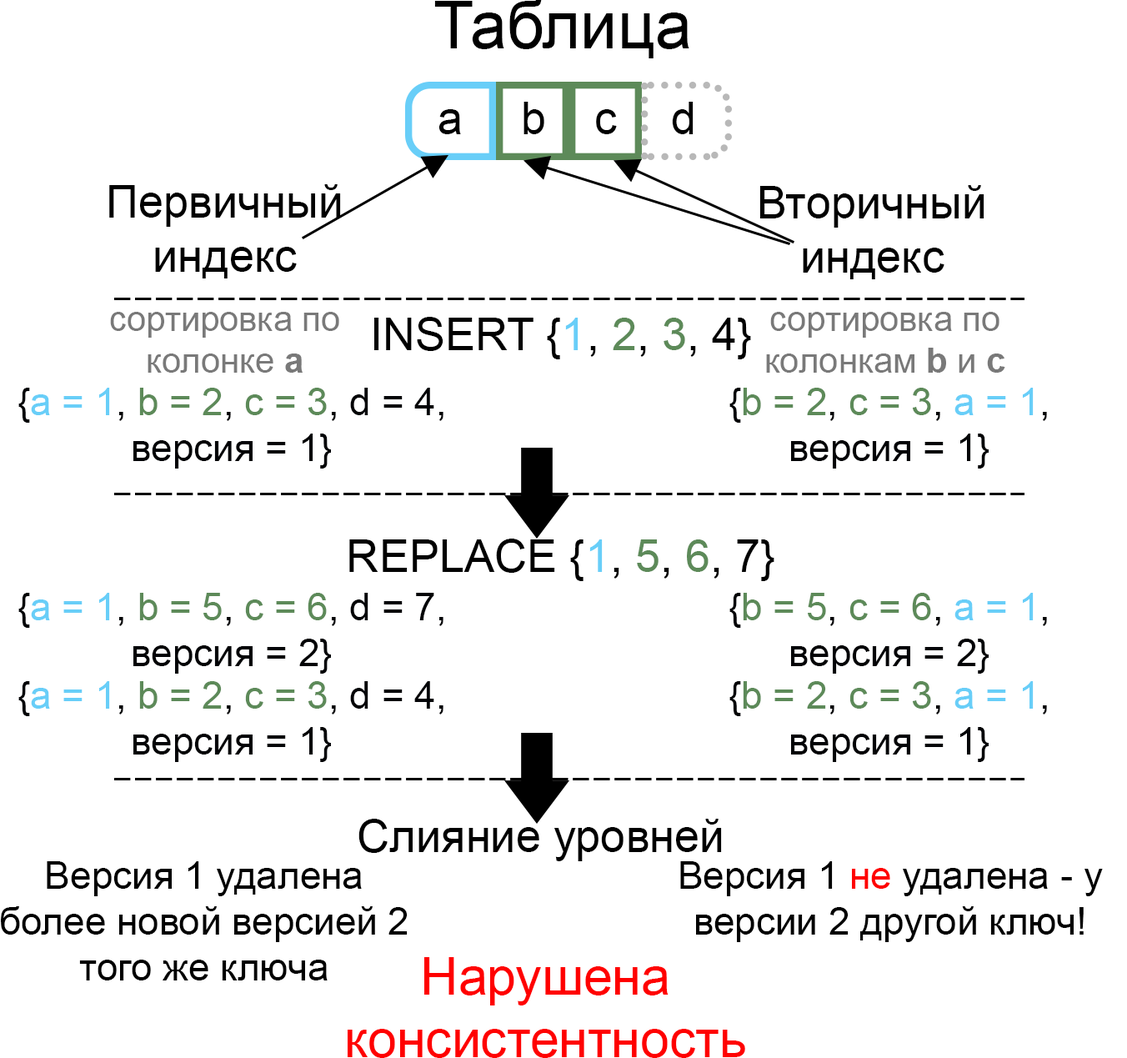
<style>
.page{position:relative;width:1127px;height:1058px;background:#ffffff}
.page>*{position:absolute;margin:0}
.t1{font:66px "ArialMT";color:#000000}
.t2{font:45.2px "ArialMT";color:#000000}
.t3{font:34.7px "ArialMT";color:#797979}
.t4{font:34.7px "Arial-BoldMT";color:#797979}
.t5{font:45.2px "ArialMT";color:#68cef8}
.t6{font:45.2px "ArialMT";color:#5d8a59}
.t7{font:38.2px "ArialMT";color:#020306}
.t8{font:38.2px "ArialMT";color:#68cef8}
.t9{font:38.2px "ArialMT";color:#5d8a59}
.t10{font:38.2px "ArialMT";color:#000000}
.t11{font:38.2px "ArialMT";color:#ff0000}
.t12{font:52.1px "ArialMT";color:#ff0000}
</style>
<div class="page">
<p class="t1" style="left:434px;top:0px;width:255px;height:58px">Таблица</p>
<p class="t2" style="left:524px;top:102px;width:20px;height:32px">b</p>
<p class="t2" style="left:672px;top:102px;width:22px;height:32px">d</p>
<p class="t2" style="left:439px;top:109px;width:22px;height:25px">a</p>
<p class="t2" style="left:596px;top:109px;width:21px;height:25px">c</p>
<p class="t2" style="left:109px;top:184px;width:232px;height:94px;text-align:center">Первичный<br>индекс</p>
<p class="t2" style="left:759px;top:185px;width:226px;height:94px;text-align:center">Вторичный<br>индекс</p>
<p class="t3" style="left:110px;top:312px;width:229px;height:61px;text-align:center">сортировка по<br>колонке <span class="t4">a</span></p>
<p class="t2" style="left:374px;top:317px;width:377px;height:42px">INSERT {<span class="t5">1</span>, <span class="t6">2</span>, <span class="t6">3</span>, 4}</p>
<p class="t3" style="left:766px;top:312px;width:239px;height:61px;text-align:center">сортировка по<br>колонкам <span class="t4">b</span> и <span class="t4">c</span></p>
<p class="t7" style="left:18px;top:388px;width:426px;height:81px;text-align:center">{<span class="t8">a = 1</span>, <span class="t9">b = 2</span>, <span class="t9">c = 3</span>, d = 4,<br>версия = 1}</p>
<p class="t7" style="left:729px;top:388px;width:318px;height:81px;text-align:center">{<span class="t9">b = 2</span>, <span class="t9">c = 3</span>, <span class="t8">a = 1</span>,<br>версия = 1}</p>
<p class="t2" style="left:349px;top:539px;width:425px;height:42px">REPLACE {<span class="t5">1</span>, <span class="t6">5</span>, <span class="t6">6</span>, 7}</p>
<p class="t7" style="left:18px;top:593px;width:426px;height:81px;text-align:center">{<span class="t8">a = 1</span>, <span class="t9">b = 5</span>, <span class="t9">c = 6</span>, d = 7,<br>версия = 2}</p>
<p class="t7" style="left:729px;top:593px;width:318px;height:81px;text-align:center">{<span class="t9">b = 5</span>, <span class="t9">c = 6</span>, <span class="t8">a = 1</span>,<br>версия = 2}</p>
<p class="t7" style="left:18px;top:681px;width:426px;height:81px;text-align:center">{<span class="t8">a = 1</span>, <span class="t9">b = 2</span>, <span class="t9">c = 3</span>, d = 4,<br>версия = 1}</p>
<p class="t7" style="left:729px;top:681px;width:318px;height:81px;text-align:center">{<span class="t9">b = 2</span>, <span class="t9">c = 3</span>, <span class="t8">a = 1</span>,<br>версия = 1}</p>
<p class="t2" style="left:358px;top:819px;width:364px;height:42px">Слияние уровней</p>
<p class="t10" style="left:1px;top:861px;width:407px;height:119px;text-align:center">Версия 1 удалена<br>более новой версией 2<br>того же ключа</p>
<p class="t10" style="left:680px;top:861px;width:423px;height:81px;text-align:center">Версия 1 <span class="t11">не</span> удалена - у<br>версии 2 другой ключ!</p>
<p class="t12" style="left:348px;top:957px;width:397px;height:101px;text-align:center">Нарушена<br>консистентность</p>
</div>
